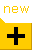
<style>
.page{position:relative;width:50px;height:50px;background:#ffffff}
.page>*{position:absolute;margin:0}
.t1{font:12px "Verdana";color:#ffcc00}
</style>
<div class="page">
<p class="t1" style="left:4px;top:6px;width:25px;height:7px">new</p>
</div>
